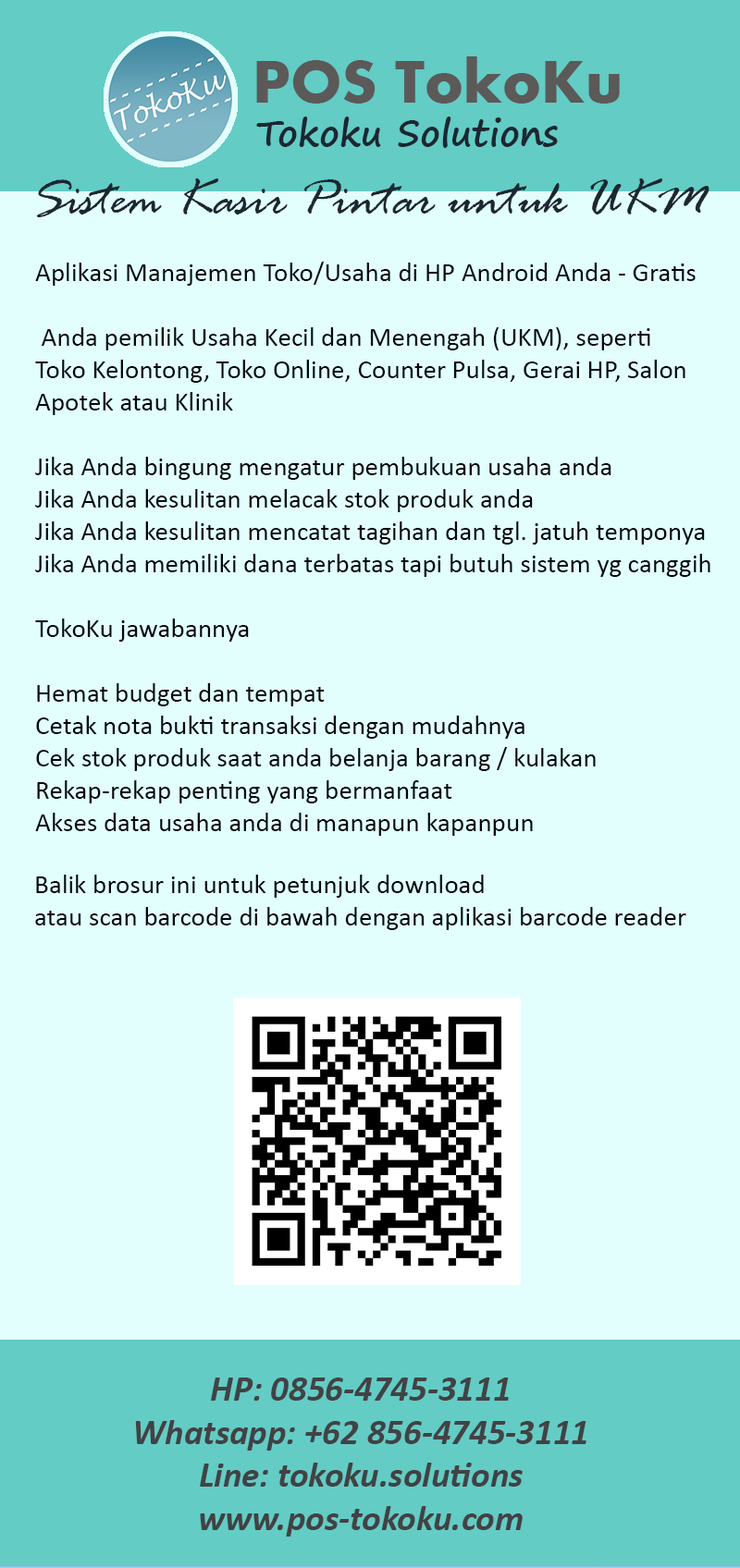
<style>
.page{position:relative;width:740px;height:1568px;background:#e2fefd}
.page>*{position:absolute;margin:0}
.t1{font:62.9px "Aharoni-Bold";color:#5c5959}
.t2{font:36px "SegoePrint-Bold";color:#1c2731}
.t3{font:53.9px "RageItalic";color:#1c2731}
.t4{font:27px "Calibri";color:#01070c}
.t5{font:27px "Calibri";color:#01070d}
.t6{font:36px "Calibri-BoldItalic";color:#424244}
</style>
<div class="page">
<p class="t1" style="left:256px;top:56px;width:363px;height:48px">POS TokoKu</p>
<p class="t2" style="left:256px;top:116px;width:301px;height:32px">Tokoku Solutions</p>
<p class="t3" style="left:36px;top:178px;width:673px;height:39px">Sistem Kasir Pintar untuk UKM</p>
<p class="t4" style="left:35px;top:262px;width:675px;height:574px;text-align:right">Aplikasi Manajemen Toko/Usaha di HP Android Anda - Gratis<br><br>Anda pemilik Usaha Kecil dan Menengah (UKM), seperti <br>Toko Kelontong, Toko Online, Counter Pulsa, Gerai HP, Salon<br>Apotek atau Klinik<br><br>Jika Anda bingung mengatur pembukuan usaha anda<br>Jika Anda kesulitan melacak stok produk anda<br>Jika Anda kesulitan mencatat tagihan dan tgl. jatuh temponya<br>Jika Anda memiliki dana terbatas tapi butuh sistem yg canggih<br><br>TokoKu jawabannya<br><br>Hemat budget dan tempat<br>Cetak nota bukti transaksi dengan mudahnya<br>Cek stok produk saat anda belanja barang / kulakan<br>Rekap-rekap penting yang bermanfaat<br>Akses data usaha anda di manapun kapanpun</p>
<p class="t5" style="left:35px;top:875px;width:651px;height:55px;text-align:right">Balik brosur ini untuk petunjuk download<br>atau scan barcode di bawah dengan aplikasi barcode reader</p>
<p class="t6" style="left:135px;top:1378px;width:451px;height:159px;text-align:center">HP: 0856-4745-3111<br>Whatsapp: +62 856-4745-3111<br>Line: tokoku.solutions<br>www.pos-tokoku.com</p>
</div>
